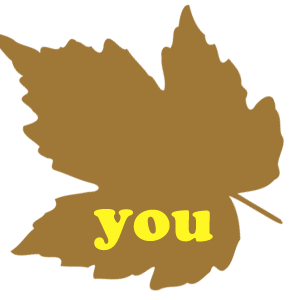
<style>
.page{position:relative;width:300px;height:300px;background:#9f7837}
.page>*{position:absolute;margin:0}
.t1{font:60px "CooperBlackStd";color:#fff724}
</style>
<div class="page">
<p class="t1" style="left:94px;top:209px;width:119px;height:42px;rotate:1deg">you</p>
</div>
